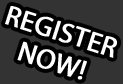
<style>
.page{position:relative;width:123px;height:84px;background:#333333}
.page>*{position:absolute;margin:0}
.t1{font:28px/30.7px "MyriadPro-Regular";color:#fefefe;text-transform:uppercase;font-weight:bold}
</style>
<div class="page">
<p class="t1" style="left:5px;top:6px;width:112px;height:74px;text-align:center;rotate:18deg">Register<br>Now!</p>
</div>
